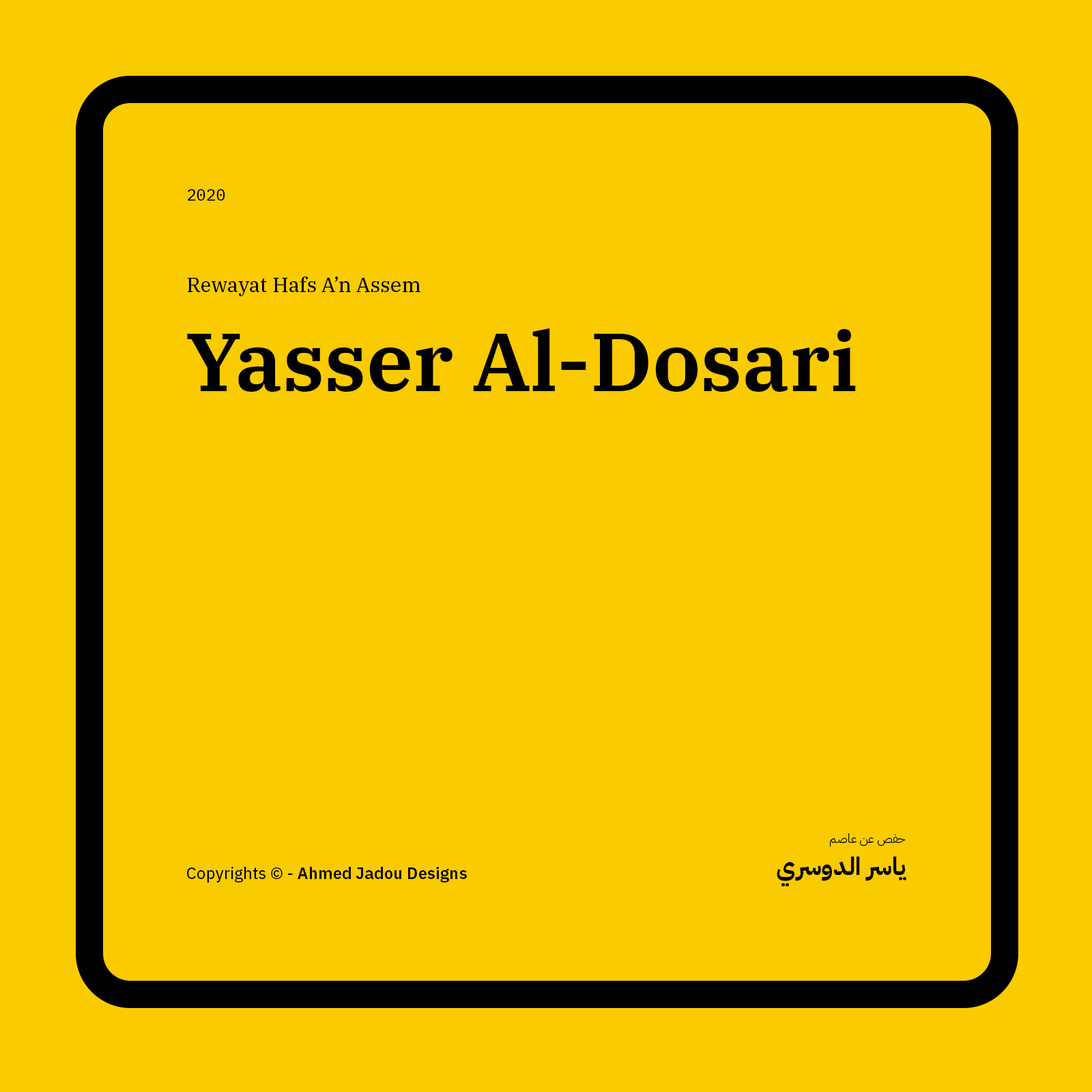
<style>
.page{position:relative;width:1092px;height:1092px;background:#facb00}
.page>*{position:absolute;margin:0}
.t1{font:16.4px "IBMPlexMono-Text";color:#000000}
.t2{font:20.5px "IBMPlexSerif-Text";color:#000000}
.t3{font:81.9px "IBMPlexSerif-SemiBold";color:#000000}
.t4{font:12.3px "IBMPlexArabic-Light";color:#000000}
.t5{font:24.6px "IBMPlexArabic-Bold";color:#000000}
.t6{font:16.4px "IBMPlexSans-SemiBold";color:#000000}
.t7{font:16.4px "IBMPlexSans-Text";color:#000000}
</style>
<div class="page">
<p class="t1" style="left:188px;top:189px;width:37px;height:12px">2020</p>
<p class="t2" style="left:187px;top:276px;width:233px;height:20px">Rewayat Hafs A’n Assem</p>
<p class="t3" style="left:187px;top:328px;width:669px;height:64px">Yasser Al-Dosari</p>
<p class="t4" style="left:830px;top:833px;width:76px;height:14px">حفص عن عاصم</p>
<p class="t5" style="left:777px;top:857px;width:129px;height:30px">ياسر الدوسري</p>
<p class="t6" style="left:187px;top:867px;width:280px;height:15px"><span class="t7">Copyrights © - </span>Ahmed Jadou Designs</p>
</div>
